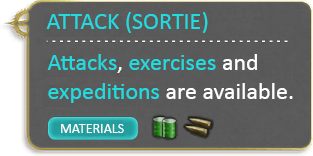
<style>
.page{position:relative;width:313px;height:156px}
.page>*{position:absolute;margin:0}
.t1{font:24px "Calibri";color:#20dbe0}
.t2{font:24px "Calibri";color:#ffffff}
.t3{font:14px "Calibri";color:#ffffff}
</style>
<div class="page">
<p class="t1" style="left:46px;top:12px;width:162px;height:21px">ATTACK (SORTIE)</p>
<p class="t2" style="left:47px;top:54px;width:246px;height:49px"><span class="t1">Attacks</span>, <span class="t1">exercises </span>and<br><span class="t1">expeditions </span>are available.</p>
<p class="t3" style="left:61px;top:124px;width:63px;height:9px">MATERIALS</p>
</div>
